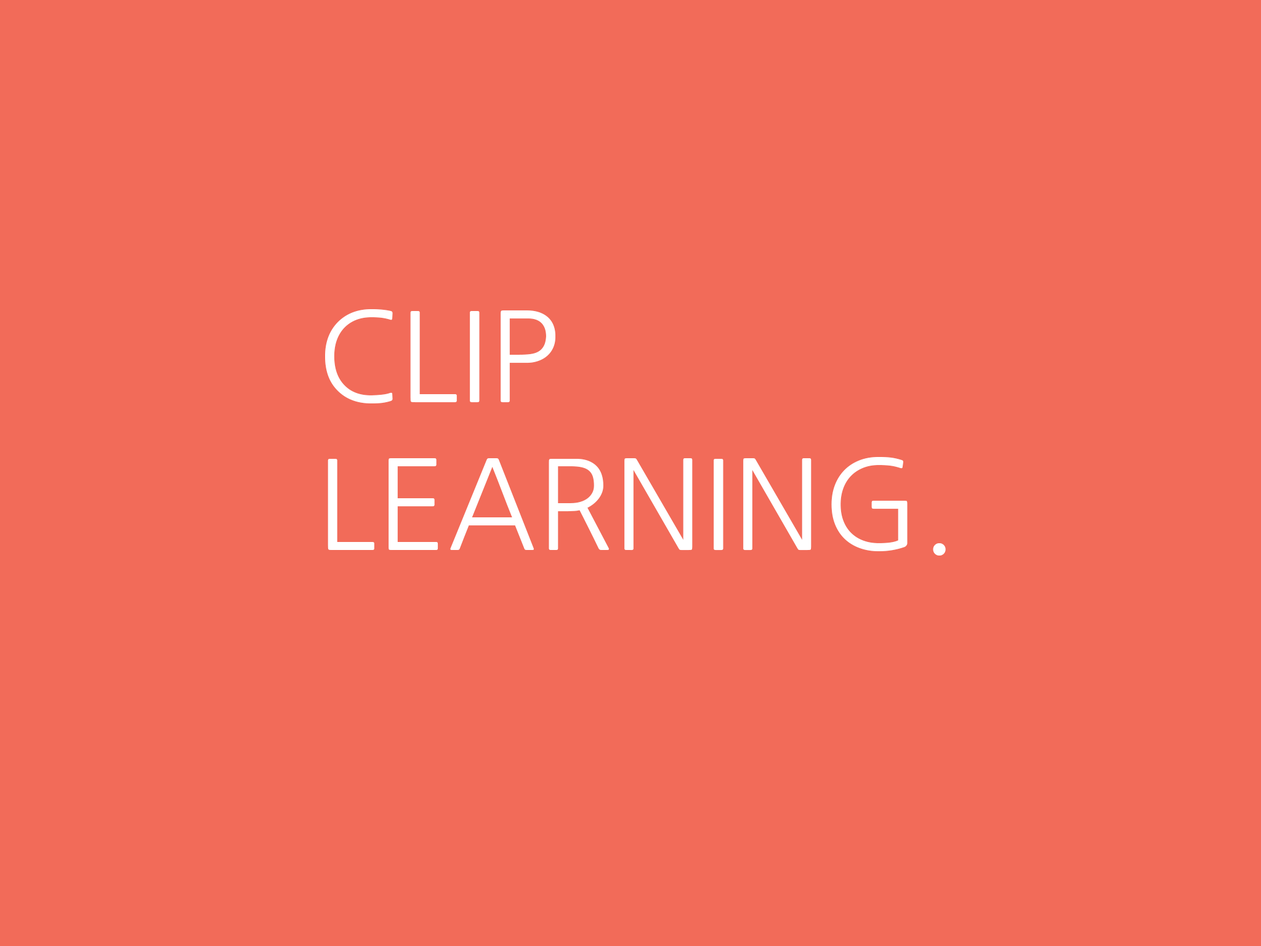
<style>
.page{position:relative;width:1261px;height:946px;background:#f26b59}
.page>*{position:absolute;margin:0}
.t1{font:123.1px "NanumGothic";color:#ffffff}
</style>
<div class="page">
<p class="t1" style="left:325px;top:309px;width:621px;height:246px">CLIP <br>LEARNING.</p>
</div>
